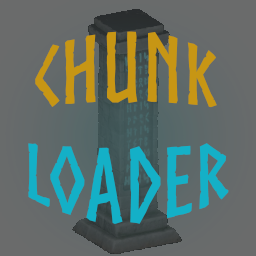
<style>
.page{position:relative;width:256px;height:256px}
.page>*{position:absolute;margin:0}
.t1{font:70px "Norse-Bold";color:#14b0c7;scale:1.28 1}
.t2{font:66.2px "Norse-Bold";color:#c79614;scale:1.28 1}
</style>
<div class="page">
<p class="t1" style="left:28px;top:31px;width:201px;height:193px;text-align:center"><span class="t2">Chunk<br></span>Loader</p>
</div>
